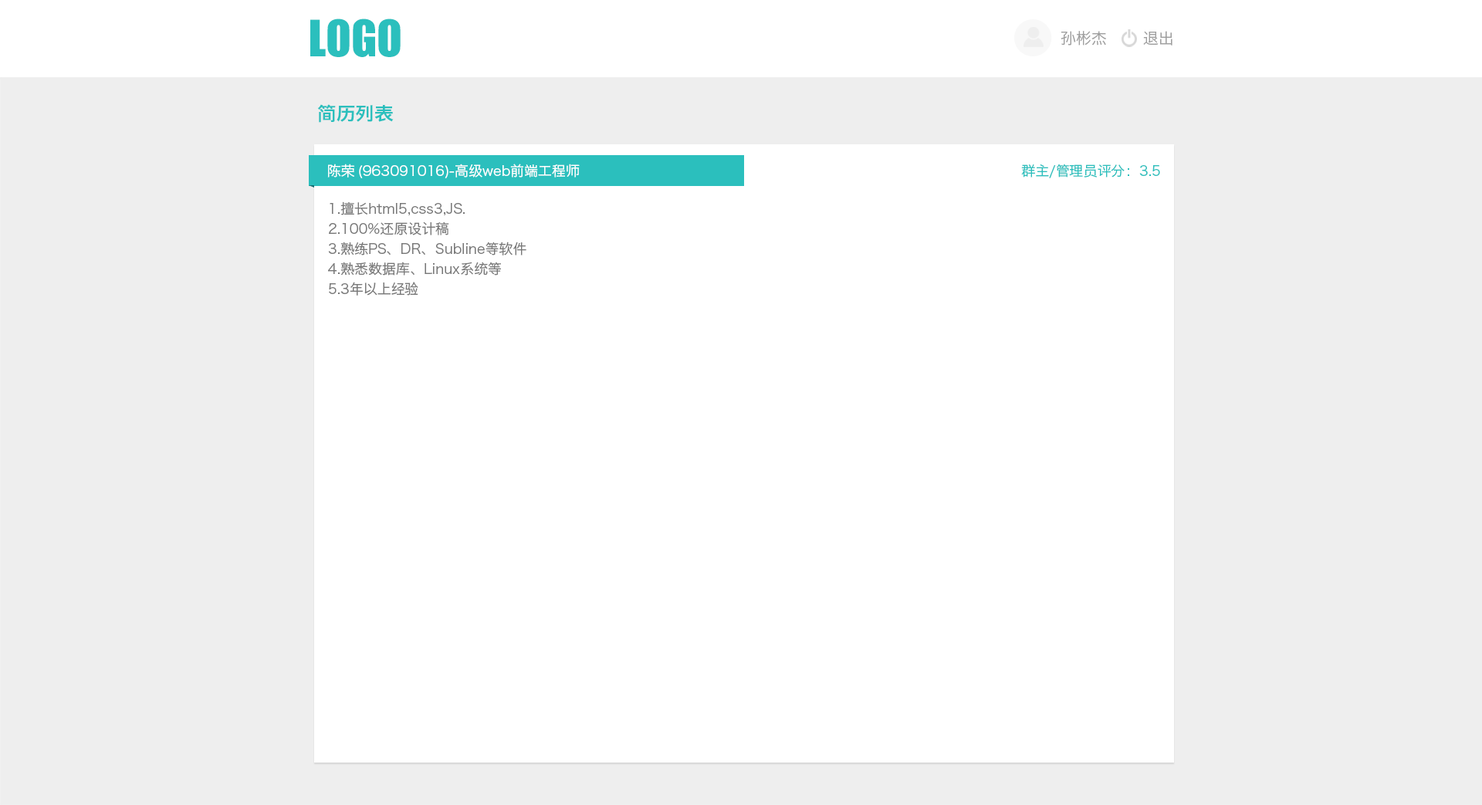
<style>
.page{position:relative;width:1482px;height:805px;background:#ffffff}
.page>*{position:absolute;margin:0}
.t1{font:46.3px "Impact";color:#2bbfbd;text-transform:uppercase}
.t2{font:15.4px "HiraginoSansGB-W3";color:#9e9e9e}
.t3{font:18.5px "HiraginoSansGB-W6";color:#2bbfbd}
.t4{font:13.9px "HiraginoSansGB-W3";color:#ffffff}
.t5{font:13.9px "HiraginoSansGB-W3";color:#2bbfbd}
.t6{font:13.9px/20.1px "HiraginoSansGB-W3";color:#787878}
</style>
<div class="page">
<p class="t1" style="left:310px;top:19px;width:90px;height:38px">logo</p>
<p class="t2" style="left:1060px;top:31px;width:46px;height:15px">孙彬杰</p>
<p class="t2" style="left:1143px;top:31px;width:29px;height:15px">退出</p>
<p class="t3" style="left:317px;top:104px;width:77px;height:19px">简历列表</p>
<p class="t4" style="left:327px;top:164px;width:27px;height:13px">陈荣</p>
<p class="t4" style="left:359px;top:164px;width:221px;height:14px">(963091016)-高级web前端工程师</p>
<p class="t5" style="left:1021px;top:164px;width:139px;height:14px">群主/管理员评分：3.5</p>
<p class="t6" style="left:328px;top:201px;width:198px;height:95px">1.擅长html5,css3,JS.<br>2.100%还原设计稿<br>3.熟练PS、DR、Subline等软件<br>4.熟悉数据库、Linux系统等<br>5.3年以上经验</p>
</div>
